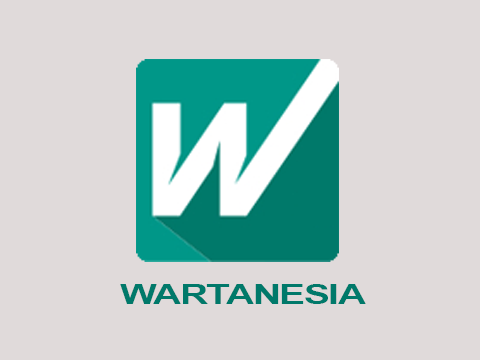
<style>
.page{position:relative;width:480px;height:360px;background:#e0dada}
.page>*{position:absolute;margin:0}
.t1{font:27px "Arial-BoldMT";letter-spacing:-0.03em;color:#00796a;scale:1.43 1}
</style>
<div class="page">
<p class="t1" style="left:120px;top:284px;width:246px;height:20px">WARTANESIA</p>
</div>
